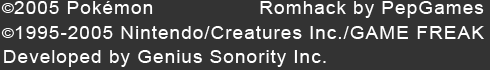
<style>
.page{position:relative;width:490px;height:70px;background:#333333}
.page>*{position:absolute;margin:0}
.t1{font:12.8px "ArialMT";letter-spacing:0.04em;color:#ffffff;scale:1.27 1}
.t2{font:18.4px "ArialMT";letter-spacing:0.04em;color:#ffffff;scale:1.06 1}
</style>
<div class="page">
<p class="t1" style="left:1px;top:3px;width:13px;height:10px">©</p>
<p class="t2" style="left:14px;top:1px;width:470px;height:17px">2005 Pokémon                 Romhack by PepGames</p>
<p class="t1" style="left:1px;top:28px;width:13px;height:10px">©</p>
<p class="t2" style="left:15px;top:26px;width:469px;height:13px">1995-2005 Nintendo/Creatures Inc./GAME FREAK</p>
<p class="t2" style="left:4px;top:50px;width:322px;height:17px">Developed by Genius Sonority Inc.</p>
</div>
